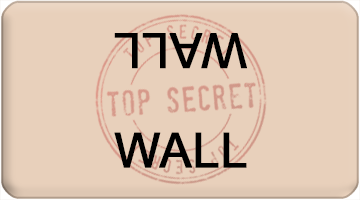
<style>
.page{position:relative;width:360px;height:200px;background:#e8d0bb}
.page>*{position:absolute;margin:0}
.t1{font:48px "ArialMT";color:#000000;font-weight:bold}
</style>
<div class="page">
<p class="t1" style="left:114px;top:33px;width:133px;height:36px;rotate:180deg">WALL</p>
<p class="t1" style="left:114px;top:132px;width:133px;height:36px">WALL</p>
</div>
